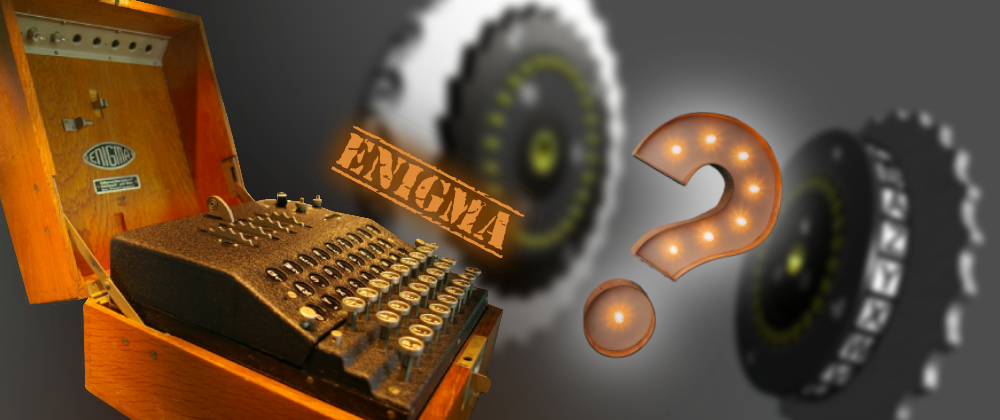
<style>
.page{position:relative;width:1000px;height:420px}
.page>*{position:absolute;margin:0}
.t1{font:51px "OldStamper";color:#e08b37}
</style>
<div class="page">
<p class="t1" style="left:331px;top:125px;width:194px;height:134px;rotate:28deg">ENIGMA</p>
</div>
